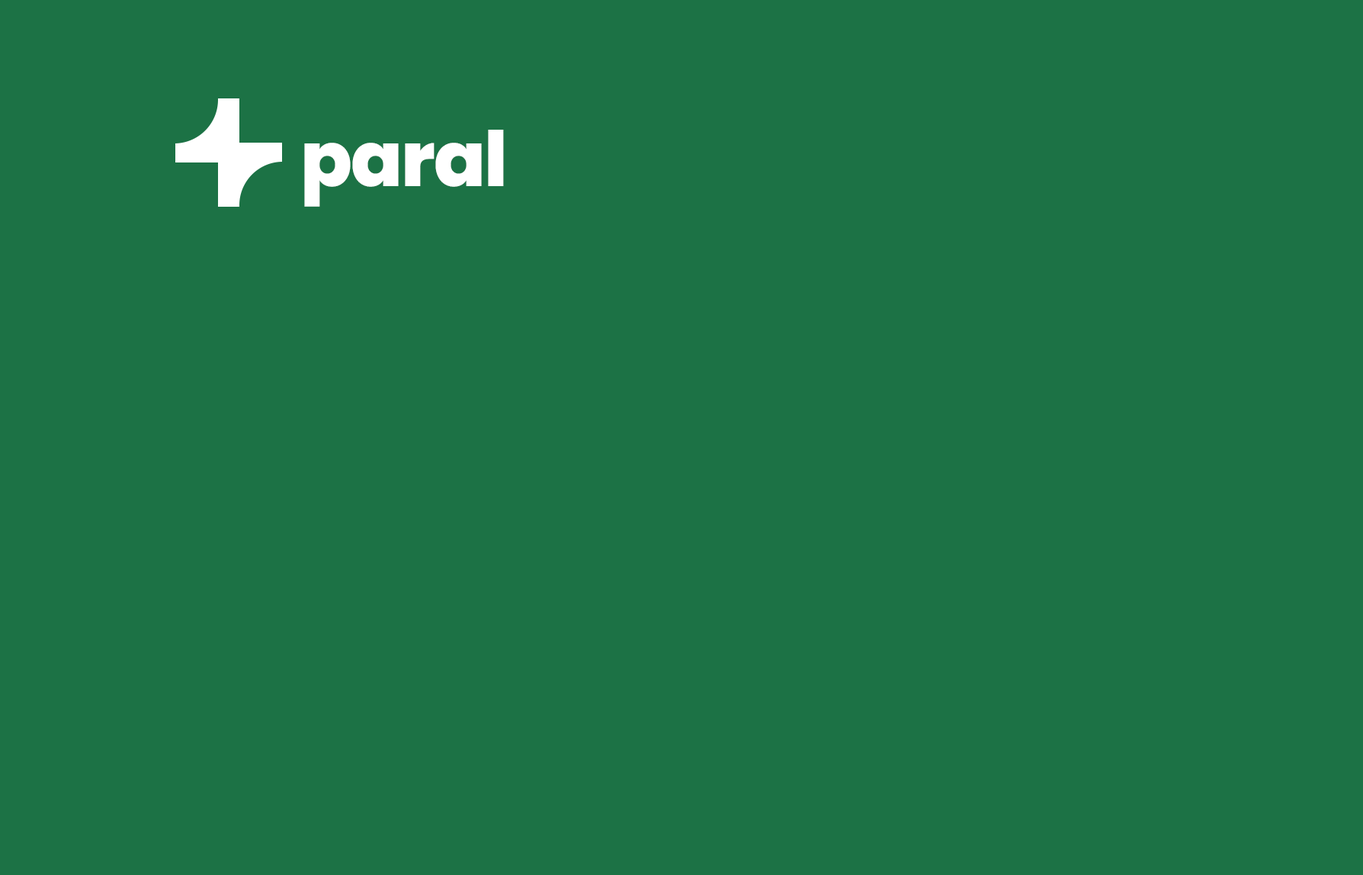
<style>
.page{position:relative;width:1363px;height:875px;background:#1c7245}
.page>*{position:absolute;margin:0}
.t1{font:76.3px "Poppins-ExtraBold";letter-spacing:-0.02em;color:#ffffff}
</style>
<div class="page">
<p class="t1" style="left:304px;top:130px;width:200px;height:77px">paral</p>
</div>
